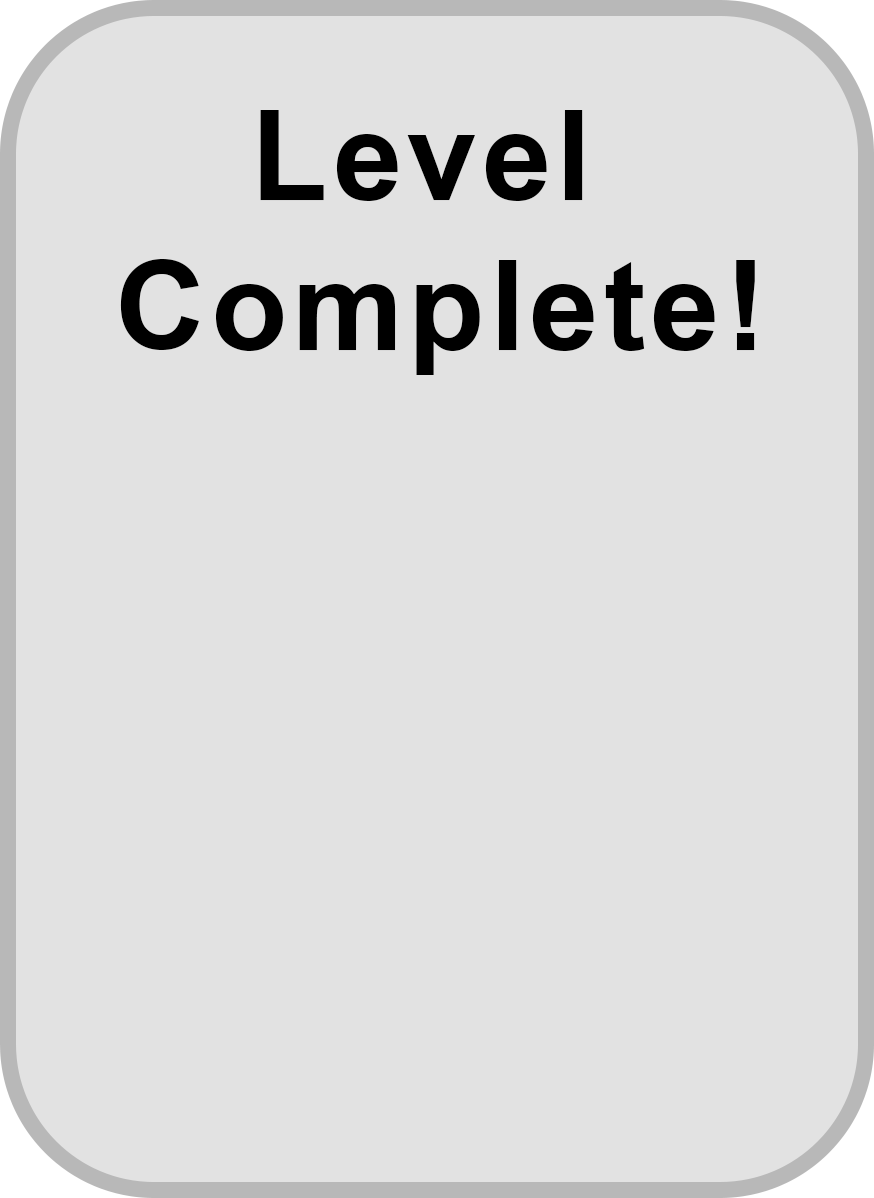
<style>
.page{position:relative;width:874px;height:1198px;background:#e2e2e2}
.page>*{position:absolute;margin:0}
.t1{font:125px "Arial-BoldMT";letter-spacing:0.04em;color:#000000}
</style>
<div class="page">
<p class="t1" style="left:120px;top:110px;width:635px;height:265px;text-align:center">Level <br>Complete!</p>
</div>
